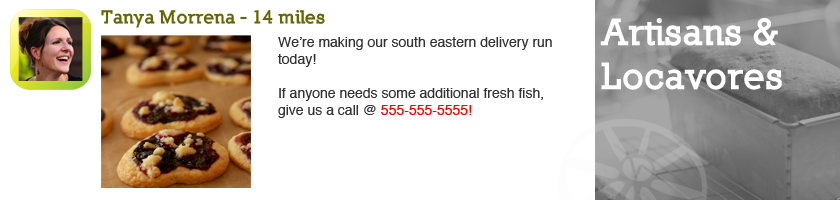
<style>
.page{position:relative;width:840px;height:200px;background:#ffffff}
.page>*{position:absolute;margin:0}
.t1{font:18px "Nilland-Black";color:#666600}
.t2{font:36px "Nilland-Black";color:#ffffff}
.t3{font:14px "Helvetica";color:#333333}
.t4{font:14px "Helvetica";color:#ff0000}
</style>
<div class="page">
<p class="t1" style="left:101px;top:9px;width:224px;height:19px">Tanya Morrena - 14 miles</p>
<p class="t2" style="left:600px;top:18px;width:182px;height:72px">Artisans &amp;<br>Locavores</p>
<p class="t3" style="left:278px;top:37px;width:274px;height:81px">We’re making our south eastern delivery run<br>today! <br><br>If anyone needs some additional fresh fish,<br>give us a call @ <span class="t4">555-555-5555!</span></p>
</div>
